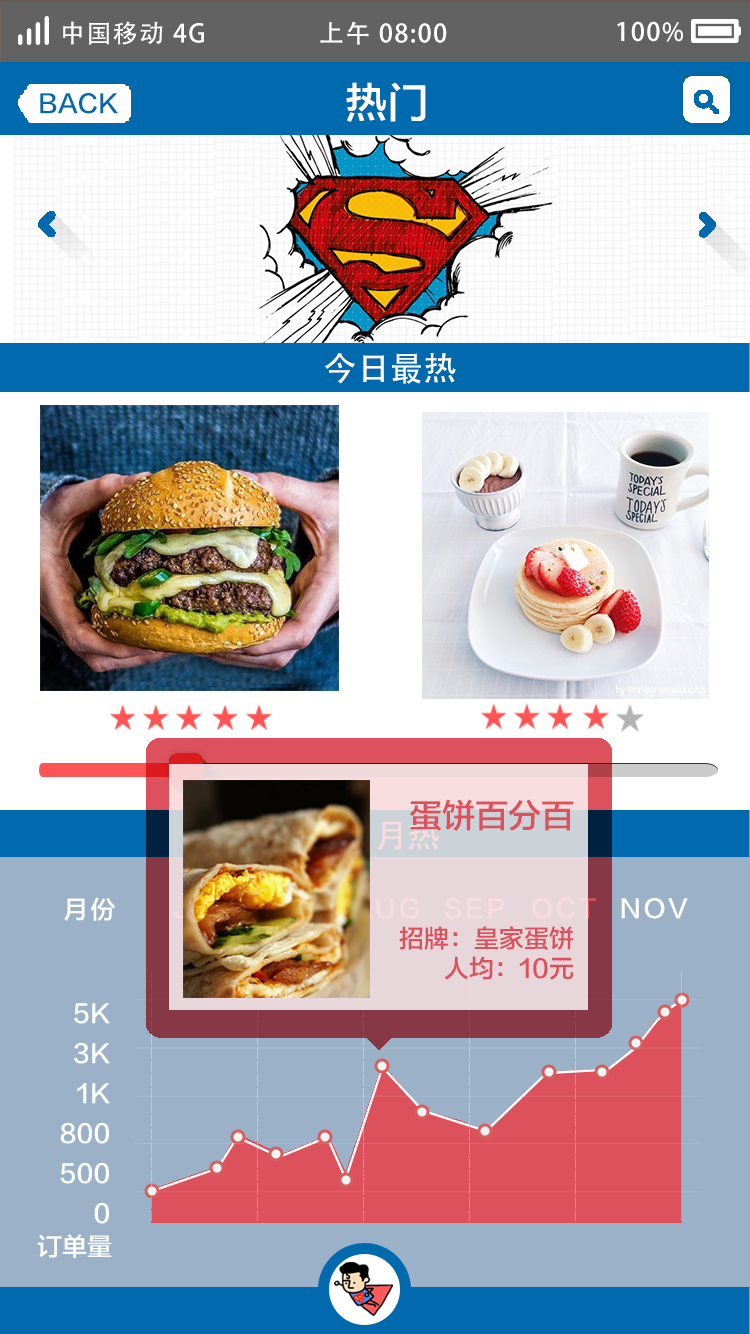
<style>
.page{position:relative;width:750px;height:1334px}
.page>*{position:absolute;margin:0}
.t1{font:25px "AdobeHeitiStd-Regular";letter-spacing:0.06em;color:#ffffff}
.t2{font:41.7px "FZLTZHK--GBK1-0";color:#ffffff;text-transform:uppercase}
.t3{font:25px "FZLTZHK--GBK1-0";color:#016aae;text-transform:uppercase}
.t4{font:33.3px "AdobeHeitiStd-Regular";color:#ffffff}
.t5{font:25px "FZLTZHK--GBK1-0";color:#dc515b;text-transform:uppercase}
.t6{font:33.3px "FZLTZHK--GBK1-0";color:#dc515b;text-transform:uppercase}
.t7{font:25px "FZLTZHK--GBK1-0";letter-spacing:0.1em;color:#ffffff;text-transform:uppercase}
.t8{font:25px "FZLTZHK--GBK1-0";letter-spacing:0.1em;color:#f8dcde;text-transform:uppercase}
.t9{font:25px "FZLTZHK--GBK1-0";color:#ffffff}
.t10{font:25px "FZLTZHK--GBK1-0";color:#ffffff;text-transform:uppercase}
</style>
<div class="page">
<p class="t1" style="left:63px;top:21px;width:141px;height:24px">中国移动 4G</p>
<p class="t1" style="left:320px;top:21px;width:127px;height:24px">上午 08:00</p>
<p class="t1" style="left:617px;top:21px;width:66px;height:21px">100%</p>
<p class="t2" style="left:346px;top:82px;width:80px;height:40px">热门</p>
<p class="t3" style="left:40px;top:92px;width:78px;height:22px">back</p>
<p class="t4" style="left:324px;top:353px;width:132px;height:31px">今日最热</p>
<p class="t5" style="left:399px;top:799px;width:175px;height:181px;text-align:right"><span class="t6">蛋饼百分百<br></span><br><br><br>招牌：皇家蛋饼<br>人均：10元</p>
<p class="t7" style="left:64px;top:897px;width:51px;height:24px">月份</p>
<p class="t8" style="left:444px;top:897px;width:61px;height:22px">SEP</p>
<p class="t8" style="left:532px;top:897px;width:64px;height:22px">Oct</p>
<p class="t7" style="left:621px;top:897px;width:67px;height:22px">Nov</p>
<p class="t9" style="left:74px;top:1003px;width:36px;height:21px">5K</p>
<p class="t9" style="left:74px;top:1042px;width:36px;height:22px">3K</p>
<p class="t9" style="left:77px;top:1083px;width:33px;height:21px">1K</p>
<p class="t9" style="left:60px;top:1122px;width:49px;height:22px">800</p>
<p class="t9" style="left:60px;top:1162px;width:49px;height:22px">500</p>
<p class="t10" style="left:94px;top:1202px;width:15px;height:22px">0</p>
<p class="t10" style="left:37px;top:1234px;width:75px;height:24px">订单量</p>
</div>
